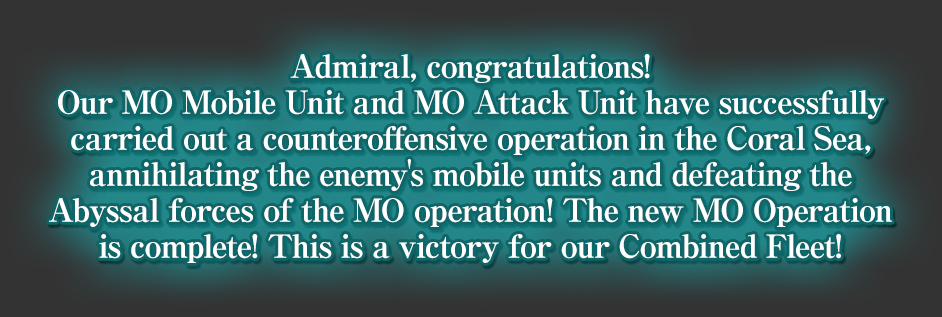
<style>
.page{position:relative;width:942px;height:317px}
.page>*{position:absolute;margin:0}
.t1{font:32px/36px "RyuminPro-ExBold";letter-spacing:-0.04em;color:#ffffff}
</style>
<div class="page">
<p class="t1" style="left:49px;top:54px;width:843px;height:209px;text-align:center">Admiral, congratulations!<br>Our MO Mobile Unit and MO Attack Unit have successfully<br>carried out a counteroffensive operation in the Coral Sea,<br>annihilating the enemy's mobile units and defeating the<br>Abyssal forces of the MO operation! The new MO Operation<br>is complete! This is a victory for our Combined Fleet!</p>
</div>
